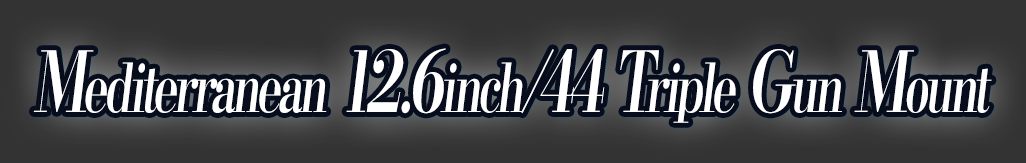
<style>
.page{position:relative;width:1026px;height:163px;background:#333333}
.page>*{position:absolute;margin:0}
.t1{font:67.2px "KochoStd-Heavy";letter-spacing:-0.08em;color:#ffffff;font-style:italic;scale:0.68 1}
.t2{font:84px "KochoStd-Heavy";letter-spacing:-0.08em;color:#ffffff;font-style:italic;scale:0.68 1}
</style>
<div class="page">
<p class="t1" style="left:33px;top:48px;width:959px;height:75px"><span class="t2">M</span>editerranean<span class="t2"> 12.6</span>inch<span class="t2">/44 T</span>riple<span class="t2"> G</span>un<span class="t2"> M</span>ount</p>
</div>
